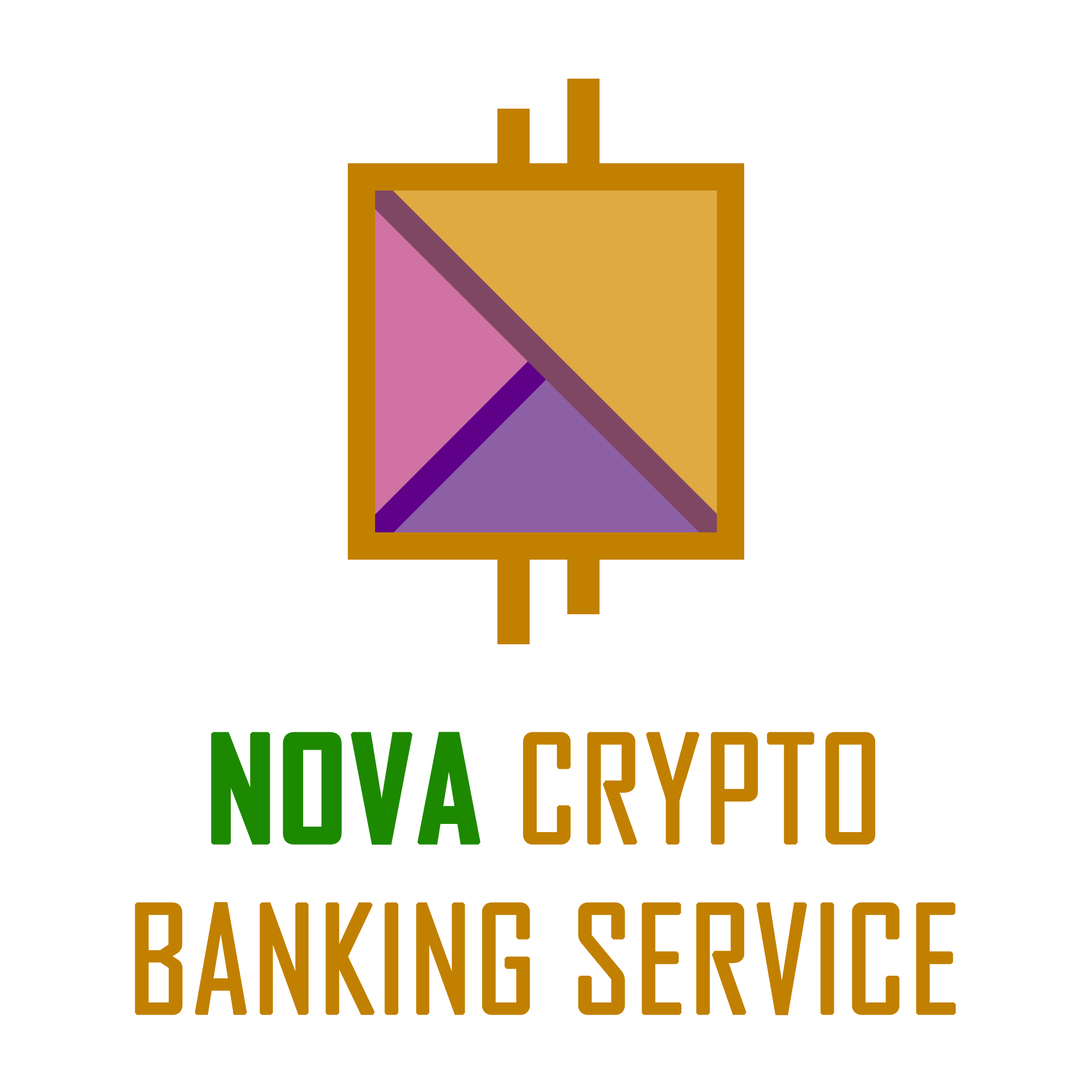
<style>
.page{position:relative;width:1092px;height:1092px;background:#ffffff}
.page>*{position:absolute;margin:0}
.t1{font:142px "AgencyFB-Reg";color:#c28000;font-weight:bold}
.t2{font:142px "AgencyFB-Bold";color:#1d8900;font-weight:bold}
</style>
<div class="page">
<p class="t1" style="left:135px;top:732px;width:821px;height:284px;text-align:center"><span class="t2">NOVA</span> CRYPTO<br>BANKING SERVICE</p>
</div>
